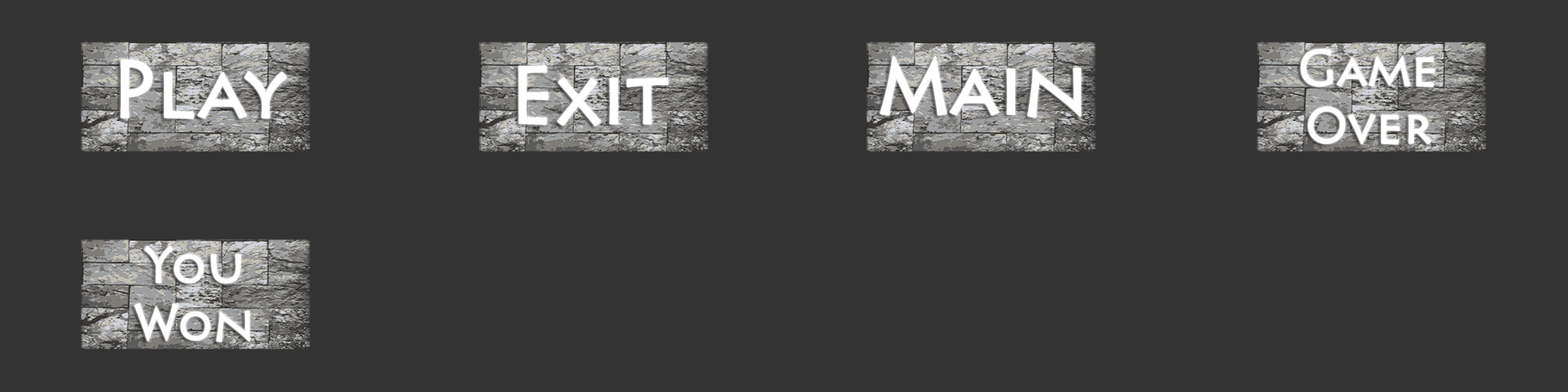
<style>
.page{position:relative;width:1568px;height:392px;background:#333333}
.page>*{position:absolute;margin:0}
.t1{font:47.9px "Pericles";color:#ffffff}
.t2{font:76.6px "Pericles";color:#ffffff}
</style>
<div class="page">
<p class="t1" style="left:1300px;top:49px;width:135px;height:96px;text-align:center">Game<br>Over</p>
<p class="t2" style="left:120px;top:59px;width:167px;height:60px">Play</p>
<p class="t2" style="left:518px;top:65px;width:150px;height:61px">Exit</p>
<p class="t2" style="left:880px;top:56px;width:202px;height:62px">Main</p>
<p class="t1" style="left:134px;top:246px;width:116px;height:96px;text-align:center">You<br>Won</p>
</div>
